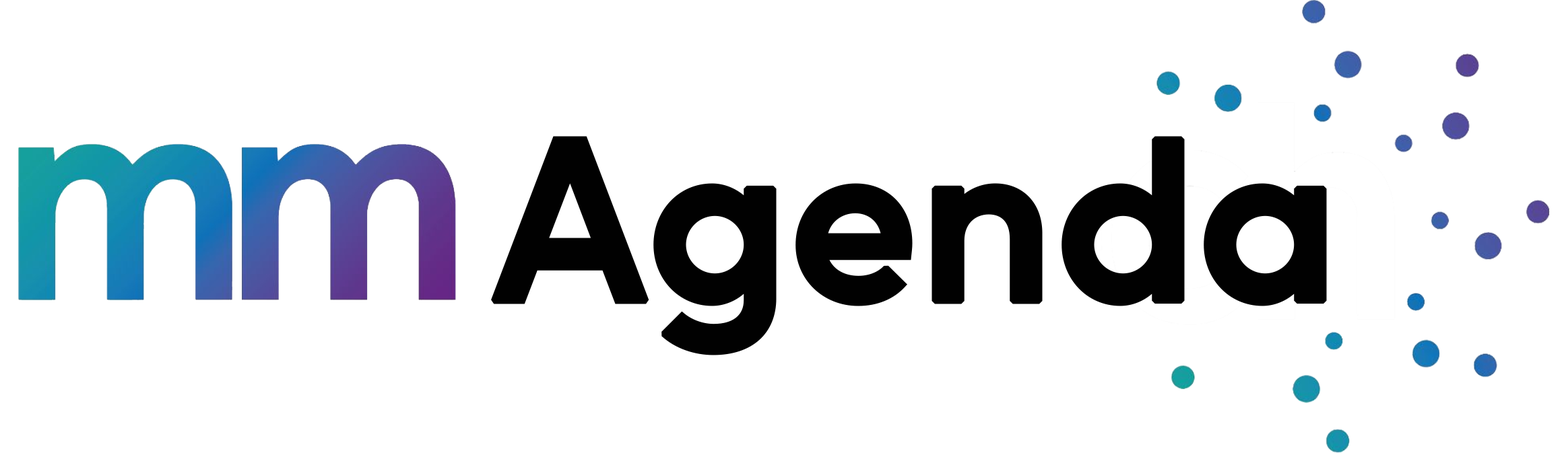
<style>
.page{position:relative;width:1568px;height:453px;background:#ffffff}
.page>*{position:absolute;margin:0}
.t1{font:224.5px "MusticaPro-SemiBold";color:#010101;font-weight:bold}
</style>
<div class="page">
<p class="t1" style="left:491px;top:136px;width:836px;height:220px">Agenda</p>
</div>
